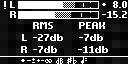
<style>
.page{position:relative;width:128px;height:64px;background:#ffffff}
.page>*{position:absolute;margin:0}
.t1{font:16px "MatchupPro";color:#ffffff}
.t2{font:15px "MatchupPro";color:#ffffff}
</style>
<div class="page">
<p class="t1" style="left:4px;top:1px;width:2px;height:8px">!</p>
<p class="t1" style="left:10px;top:1px;width:5px;height:7px">L</p>
<p class="t1" style="left:102px;top:3px;width:4px;height:3px">+</p>
<p class="t1" style="left:113px;top:1px;width:14px;height:7px">8.0</p>
<p class="t1" style="left:10px;top:11px;width:6px;height:7px">R</p>
<p class="t1" style="left:102px;top:11px;width:25px;height:7px">-15.2</p>
<p class="t1" style="left:33px;top:22px;width:72px;height:7px">RMS     PEAK</p>
<p class="t1" style="left:22px;top:34px;width:81px;height:7px">L -27db   -7db</p>
<p class="t1" style="left:21px;top:46px;width:87px;height:7px">R -7db    -11db</p>
<p class="t2" style="left:21px;top:59px;width:10px;height:3px">+-</p>
</div>
